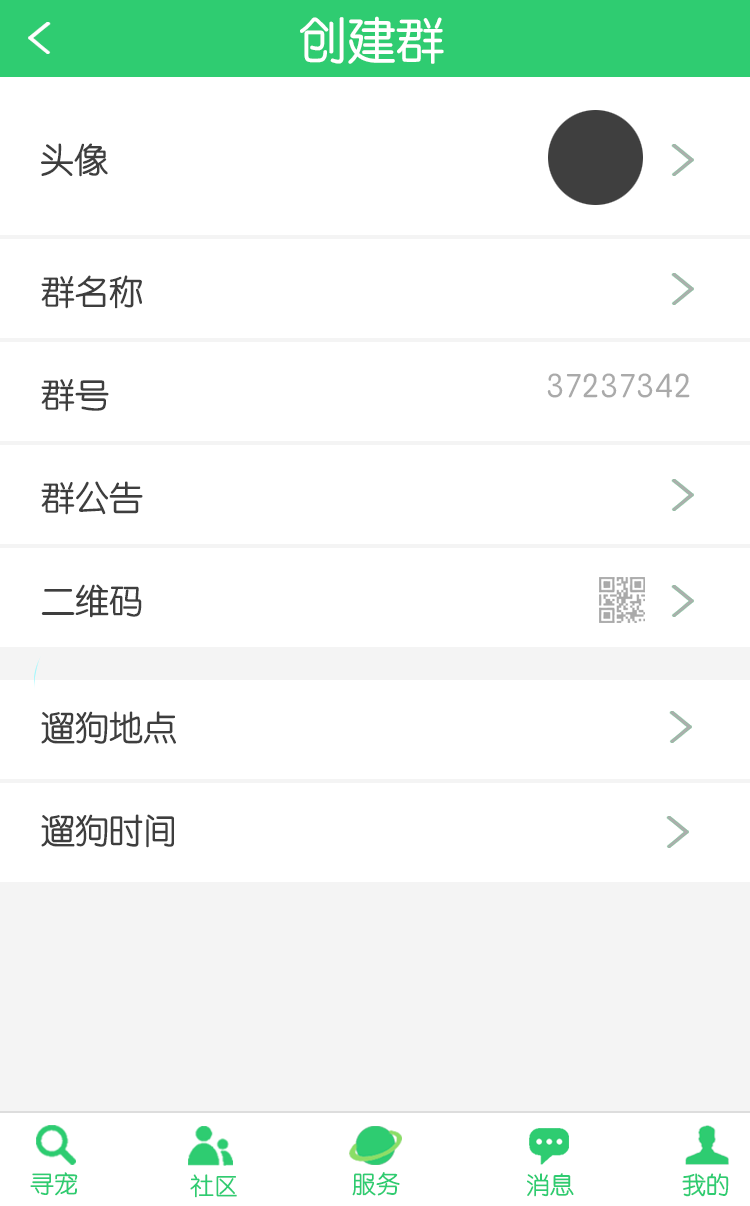
<style>
.page{position:relative;width:750px;height:1206px;background:#ffffff}
.page>*{position:absolute;margin:0}
.t1{font:48.7px "STYuanti-SC-Regular";color:#ffffff}
.t2{font:34px "STYuanti-SC-Regular";color:#3e3e3e}
.t3{font:34px/103px "STYuanti-SC-Regular";color:#3e3e3e}
.t4{font:34px/126px "STYuanti-SC-Regular";color:#3e3e3e}
.t5{font:34px "STYuanti-SC-Regular";color:#aaaaaa}
.t6{font:24px "STYuanti-SC-Regular";color:#2ecc71}
.t7{font:24px "STYuanti-SC-Regular"}
</style>
<div class="page">
<p class="t1" style="left:300px;top:16px;width:144px;height:48px">创建群</p>
<p class="t2" style="left:41px;top:143px;width:67px;height:34px">头像</p>
<p class="t3" style="left:41px;top:275px;width:102px;height:343px"><span class="t4"><br><br></span>群名称<br>群号<br>群公告<br>二维码</p>
<p class="t5" style="left:547px;top:373px;width:143px;height:25px">37237342</p>
<p class="t3" style="left:41px;top:711px;width:135px;height:137px">遛狗地点<br>遛狗时间</p>
<p class="t6" style="left:30px;top:1172px;width:48px;height:24px">寻宠</p>
<p class="t6" style="left:190px;top:1174px;width:47px;height:24px">社区</p>
<p class="t7" style="left:352px;top:1173px;width:48px;height:24px">服务</p>
<p class="t6" style="left:352px;top:1172px;width:48px;height:24px">服务</p>
<p class="t7" style="left:526px;top:1173px;width:47px;height:24px">消息</p>
<p class="t6" style="left:527px;top:1173px;width:47px;height:24px">消息</p>
<p class="t6" style="left:682px;top:1173px;width:47px;height:24px">我的</p>
<p class="t6" style="left:682px;top:1173px;width:47px;height:24px">我的</p>
</div>
